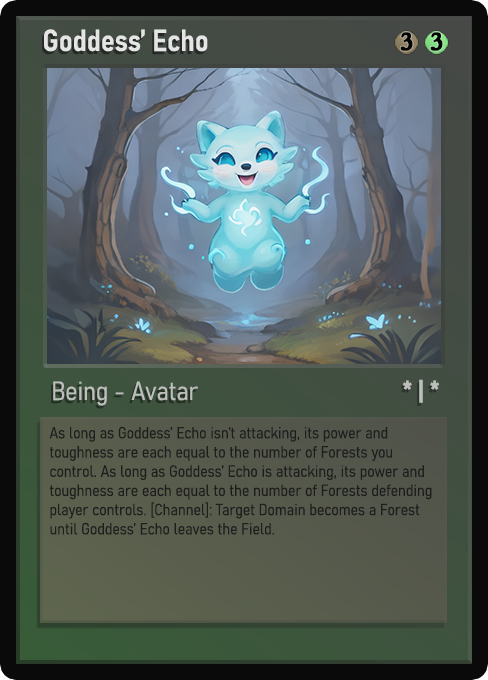
<style>
.page{position:relative;width:488px;height:680px}
.page>*{position:absolute;margin:0}
.t1{font:30px "Bahnschrift-SemiBoldSemiCondensed";color:#f2f2f2;font-weight:bold}
.t2{font:25px "WTRRoycroft";color:#000000;font-weight:bold;scale:1.09 1}
.t3{font:26px "Bahnschrift-LightSemiCondensed";color:#c8c8c8;font-weight:bold}
.t4{font:26px "Bahnschrift-BoldSemiCondensed";color:#bdbfbd;font-weight:bold}
.t5{font:16px "Bahnschrift-LightSemiCondensed";color:#1e1e1e;font-weight:bold}
</style>
<div class="page">
<p class="t1" style="left:44px;top:29px;width:164px;height:23px;opacity:0.9">Goddess’ Echo</p>
<p class="t2" style="left:400px;top:32px;width:13px;height:19px">3</p>
<p class="t2" style="left:430px;top:32px;width:13px;height:19px">3</p>
<p class="t3" style="left:53px;top:381px;width:145px;height:25px;opacity:0.9">Being - Avatar</p>
<p class="t4" style="left:403px;top:379px;width:36px;height:24px">* | *</p>
<p class="t5" style="left:49px;top:426px;width:383px;height:109px">As long as Goddess’ Echo isn’t attacking, its power and toughness are each equal to the number of Forests you control. As long as Goddess’ Echo is attacking, its power and toughness are each equal to the number of Forests defending player controls. [Channel]: Target Domain becomes a Forest until Goddess’ Echo leaves the Field.</p>
</div>
